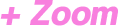
<style>
.page{position:relative;width:128px;height:26px;background:#ffffff}
.page>*{position:absolute;margin:0}
.t1{font:32px "RodinPro-EB";letter-spacing:-0.046em;color:#f880de;font-style:italic}
</style>
<div class="page">
<p class="t1" style="left:0px;top:0px;width:118px;height:26px">+ Zoom</p>
</div>
